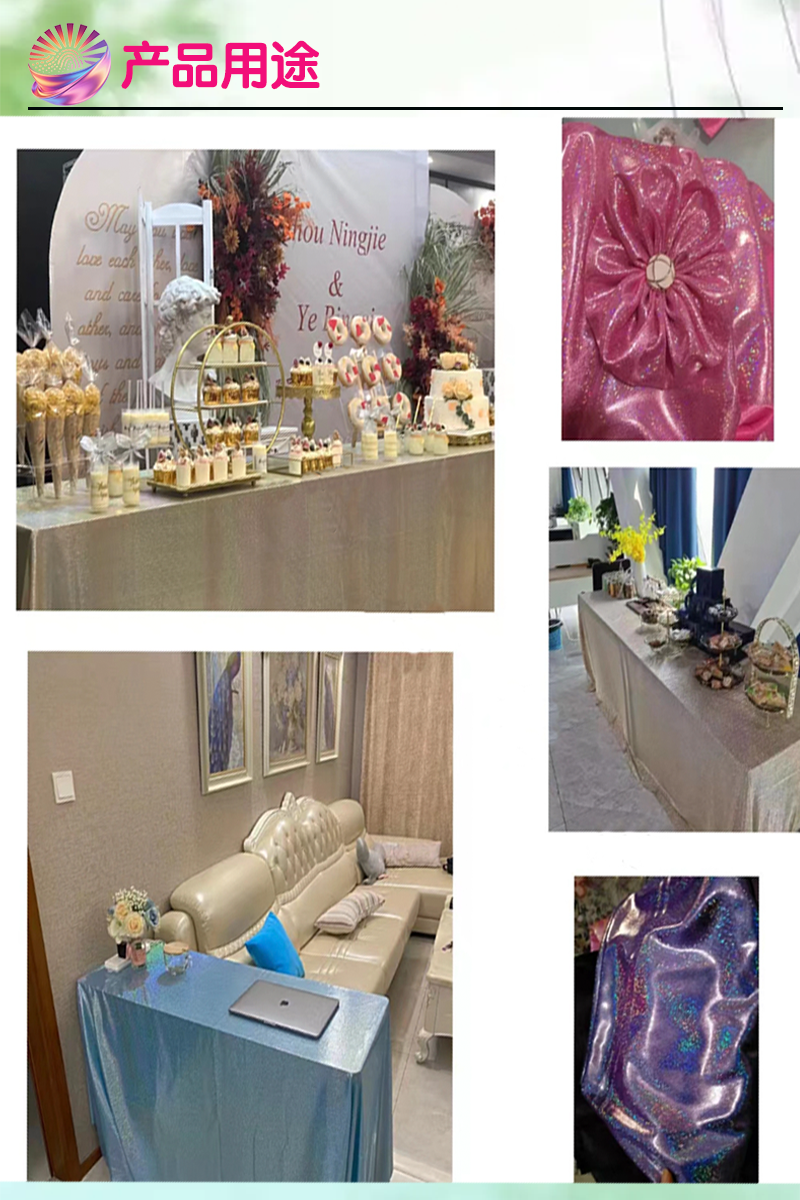
<style>
.page{position:relative;width:800px;height:1200px}
.page>*{position:absolute;margin:0}
.t1{font:50px "STYuanti-SC-Bold";color:#f20e79}
</style>
<div class="page">
<p class="t1" style="left:121px;top:40px;width:199px;height:50px">产品用途</p>
</div>
